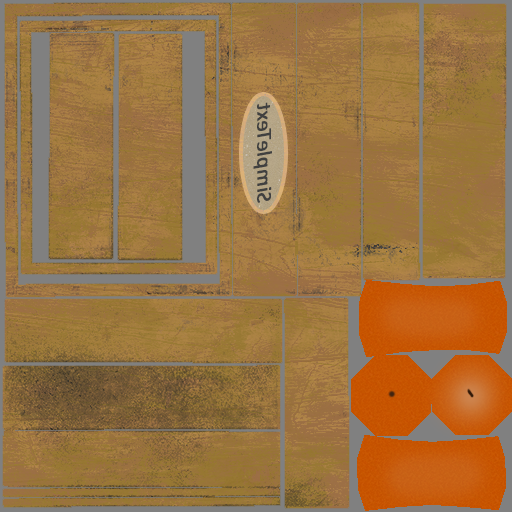
<style>
.page{position:relative;width:512px;height:512px}
.page>*{position:absolute;margin:0}
.t1{font:21.4px "Calibri";letter-spacing:-0.005em;color:#404040;font-weight:bold;font-style:italic}
</style>
<div class="page">
<p class="t1" style="left:253px;top:102px;width:19px;height:101px;rotate:-90deg">SimpleText</p>
</div>
